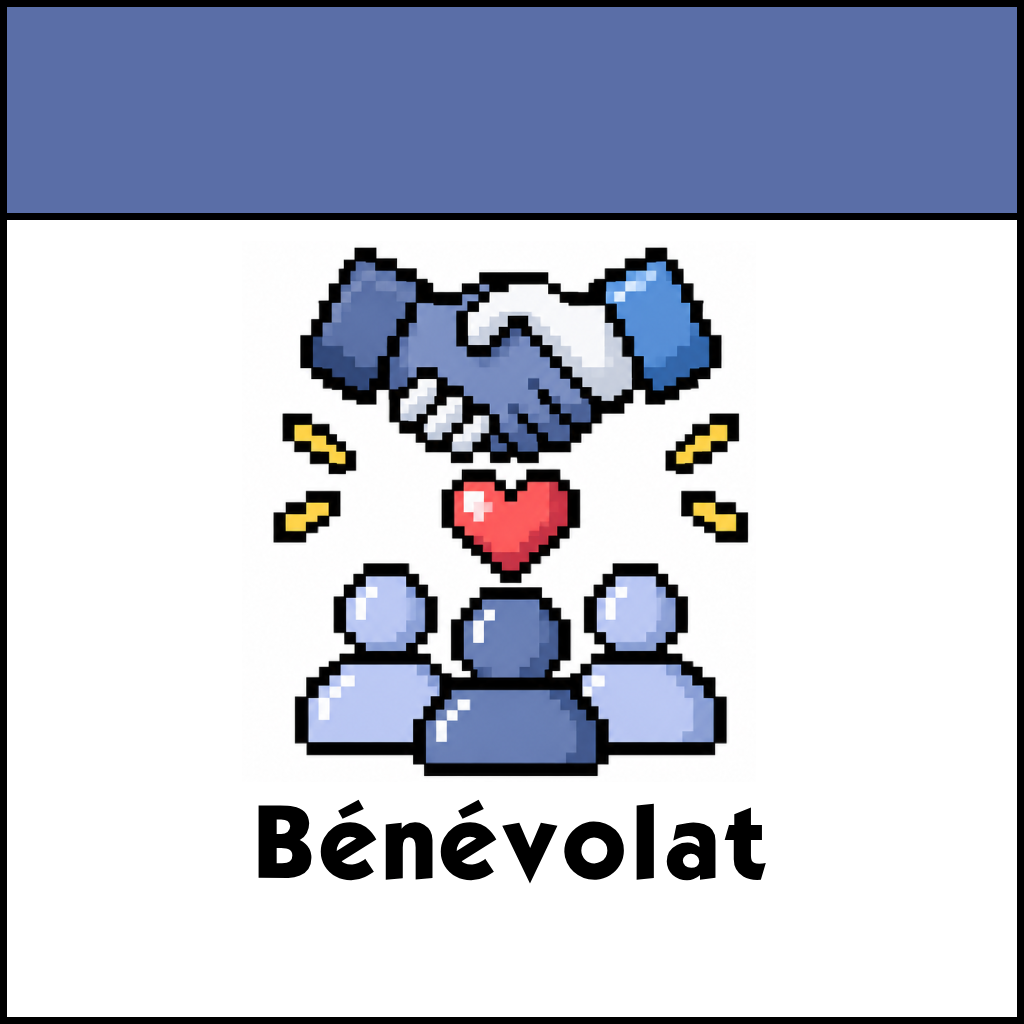
<style>
.page{position:relative;width:1024px;height:1024px;background:#ffffff}
.page>*{position:absolute;margin:0}
.t1{font:90px "KabelBdNormal";color:#000000}
</style>
<div class="page">
<p class="t1" style="left:258px;top:799px;width:508px;height:85px">Bénévolat</p>
</div>
